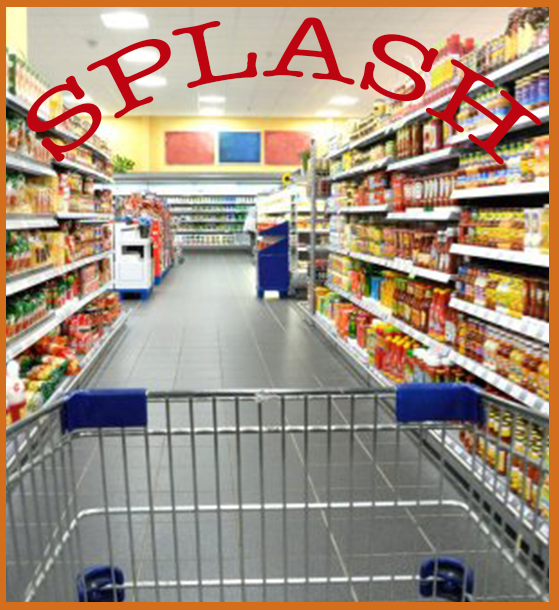
<style>
.page{position:relative;width:559px;height:610px}
.page>*{position:absolute;margin:0}
.t1{font:88.8px "AmericanTypewriter";color:#bf0411}
</style>
<div class="page">
<p class="t1" style="left:26px;top:17px;width:516px;height:148px">SPLASH</p>
</div>
